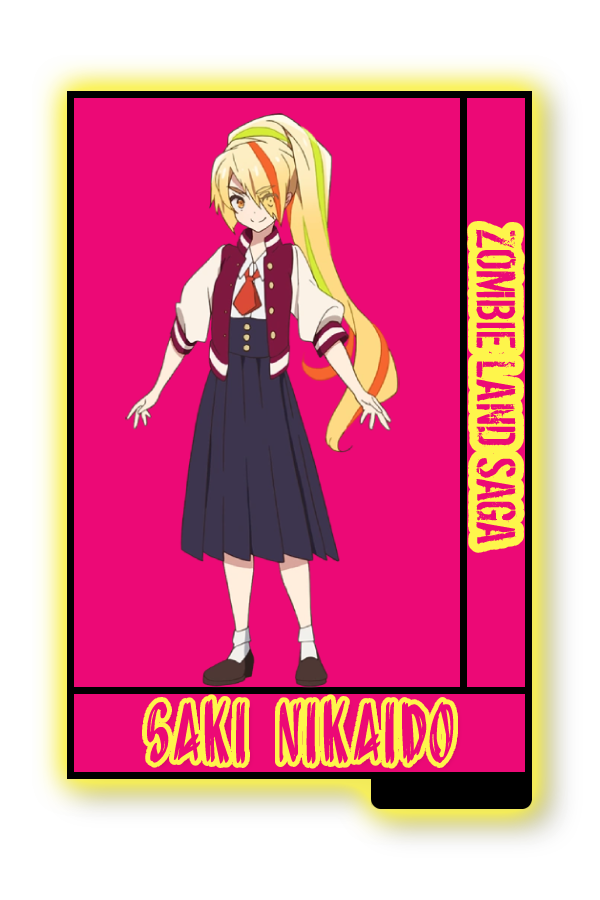
<style>
.page{position:relative;width:600px;height:900px;background:#ec0976}
.page>*{position:absolute;margin:0}
.t1{font:60.3px "DirtyEgo";color:#ec0976;scale:1.05 1}
.t2{font:72.2px "AnuDaw";color:#ec0976;scale:0.47 1}
</style>
<div class="page">
<p class="t1" style="left:476px;top:229px;width:41px;height:316px;rotate:90deg">ZOMBIE LAND SAGA</p>
<p class="t2" style="left:146px;top:699px;width:308px;height:65px">Saki Nikaido</p>
</div>
